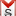
<style>
.page{position:relative;width:16px;height:16px}
.page>*{position:absolute;margin:0}
.t1{font:11px "ArialMT";color:#3c3c3c}
</style>
<div class="page">
<p class="t1" style="left:4px;top:9px;width:8px;height:8px">S</p>
</div>
